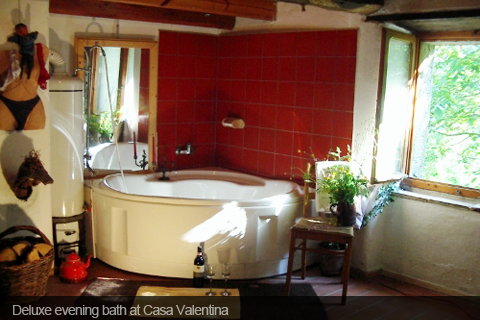
<style>
.page{position:relative;width:480px;height:320px}
.page>*{position:absolute;margin:0}
.t1{font:14px "ArialMT";letter-spacing:-0.05em;color:#a19c9b}
</style>
<div class="page">
<p class="t1" style="left:13px;top:304px;width:216px;height:14px">Deluxe evening bath at Casa Valentina</p>
</div>
